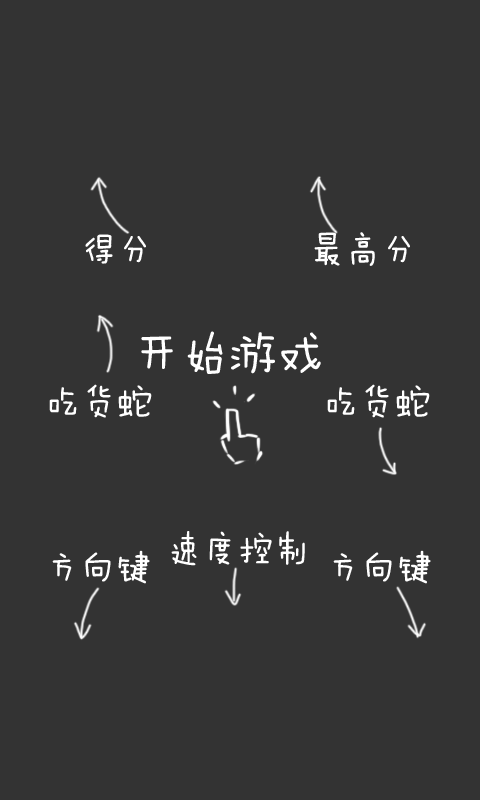
<style>
.page{position:relative;width:480px;height:800px;background:#333333}
.page>*{position:absolute;margin:0}
.t1{font:36px "FZMWJW--GB1-0";color:#ffffff}
.t2{font:48px "FZMWJW--GB1-0";color:#ffffff}
</style>
<div class="page">
<p class="t1" style="left:314px;top:232px;width:96px;height:34px">最高分</p>
<p class="t1" style="left:85px;top:234px;width:61px;height:30px">得分</p>
<p class="t2" style="left:141px;top:331px;width:180px;height:43px">开始游戏</p>
<p class="t1" style="left:49px;top:384px;width:103px;height:34px">吃货蛇</p>
<p class="t1" style="left:327px;top:384px;width:103px;height:34px">吃货蛇</p>
<p class="t1" style="left:171px;top:531px;width:134px;height:35px">速度控制</p>
<p class="t1" style="left:52px;top:550px;width:98px;height:34px">方向键</p>
<p class="t1" style="left:333px;top:550px;width:98px;height:34px">方向键</p>
</div>
